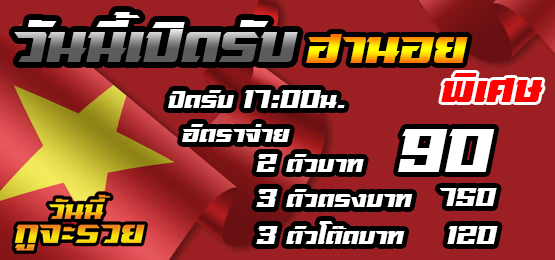
<style>
.page{position:relative;width:555px;height:260px;background:#9c1f23}
.page>*{position:absolute;margin:0}
.t1{font:70px "sdrangverV.1-Regular"}
.t2{font:60px "sdrangverV.1-Regular"}
.t3{font:50px "sdrangverV.1-Regular";color:#ff0000}
.t4{font:30px "sdrangverV.1-Regular";color:#ffffff}
.t5{font:70px "sdrangverV.1-Regular";color:#ffffff}
</style>
<div class="page">
<p class="t1" style="left:14px;top:12px;width:284px;height:50px">วันนี้เปิดรับ</p>
<p class="t2" style="left:306px;top:34px;width:162px;height:29px">ฮานอย</p>
<p class="t3" style="left:441px;top:73px;width:102px;height:29px">พิเศษ</p>
<p class="t4" style="left:168px;top:90px;width:177px;height:18px">ปิดรับ 17:00น.</p>
<p class="t4" style="left:182px;top:124px;width:108px;height:18px">อัตราจ่าย</p>
<p class="t5" style="left:398px;top:129px;width:97px;height:43px">90</p>
<p class="t4" style="left:256px;top:154px;width:108px;height:18px">2 ตัวบาท</p>
<p class="t4" style="left:256px;top:189px;width:157px;height:18px">3 ตัวตรงบาท</p>
<p class="t4" style="left:439px;top:188px;width:58px;height:18px">750</p>
<p class="t4" style="left:256px;top:221px;width:149px;height:23px">3 ตัวโต๊ดบาท</p>
<p class="t4" style="left:447px;top:226px;width:51px;height:18px">120</p>
</div>
